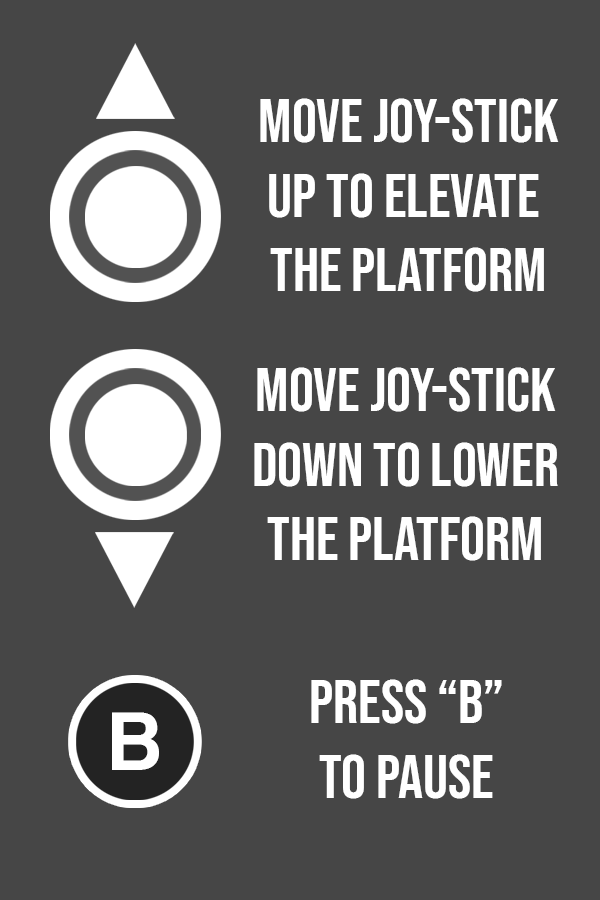
<style>
.page{position:relative;width:600px;height:900px;background:#464646}
.page>*{position:absolute;margin:0}
.t1{font:62.2px "BebasNeue-Regular";color:#ffffff}
.t2{font:86.1px "CoolveticaRg-Regular";color:#ffffff}
</style>
<div class="page">
<p class="t1" style="left:260px;top:98px;width:299px;height:194px;text-align:center">Move joy-stick<br>up to elevate <br>the platform</p>
<p class="t1" style="left:254px;top:367px;width:304px;height:194px;text-align:center">Move joy-stick<br>DOWN to lower<br>the platform</p>
<p class="t1" style="left:311px;top:679px;width:191px;height:120px;text-align:center">press “b”<br>to pause</p>
<p class="t2" style="left:112px;top:712px;width:47px;height:58px">B</p>
</div>
